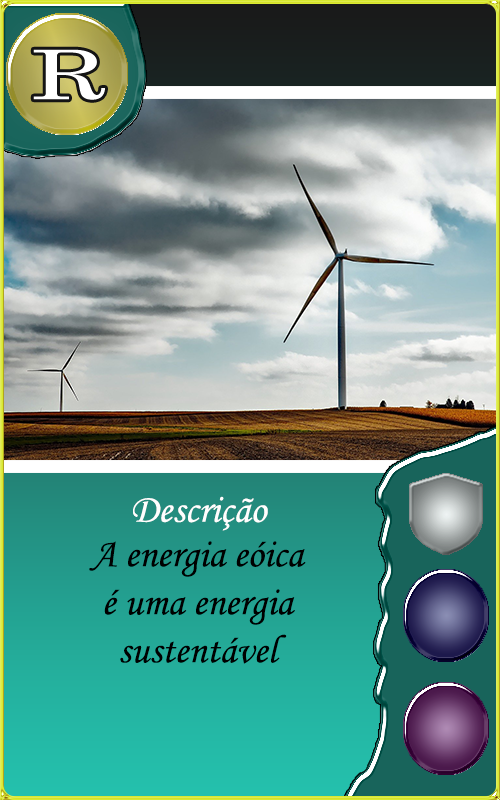
<style>
.page{position:relative;width:500px;height:800px}
.page>*{position:absolute;margin:0}
.t1{font:40px "MonotypeCorsiva";color:#fffefe}
.t2{font:40px "MonotypeCorsiva";color:#000000}
</style>
<div class="page">
<p class="t1" style="left:133px;top:496px;width:135px;height:35px">Descrição</p>
<p class="t2" style="left:89px;top:541px;width:217px;height:123px;text-align:center">A energia eóica<br>é uma energia<br>sustentável</p>
</div>
